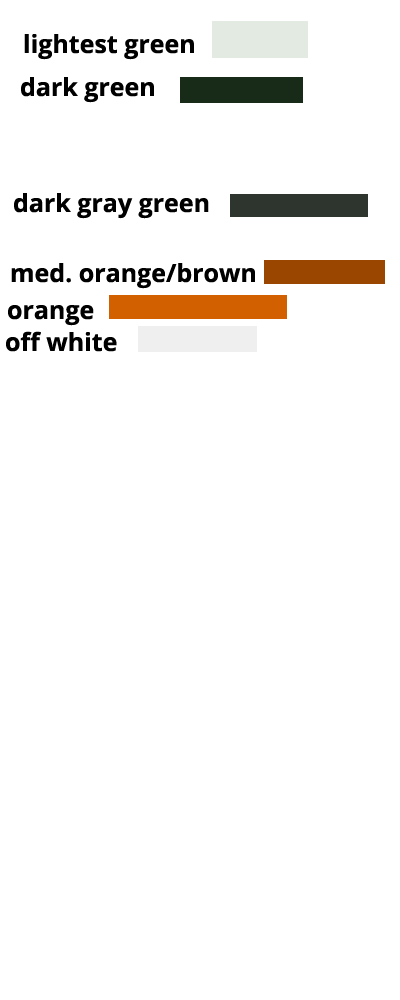
<style>
.page{position:relative;width:400px;height:1000px;background:#ffffff}
.page>*{position:absolute;margin:0}
.t1{font:25px "OpenSans-Bold";color:#000000}
</style>
<div class="page">
<p class="t1" style="left:24px;top:34px;width:170px;height:26px">lightest green</p>
<p class="t1" style="left:21px;top:77px;width:133px;height:26px">dark green</p>
<p class="t1" style="left:14px;top:193px;width:195px;height:26px">dark gray green</p>
<p class="t1" style="left:11px;top:263px;width:244px;height:26px">med. orange/brown</p>
<p class="t1" style="left:8px;top:305px;width:86px;height:21px">orange</p>
<p class="t1" style="left:6px;top:331px;width:111px;height:21px">off white</p>
</div>
